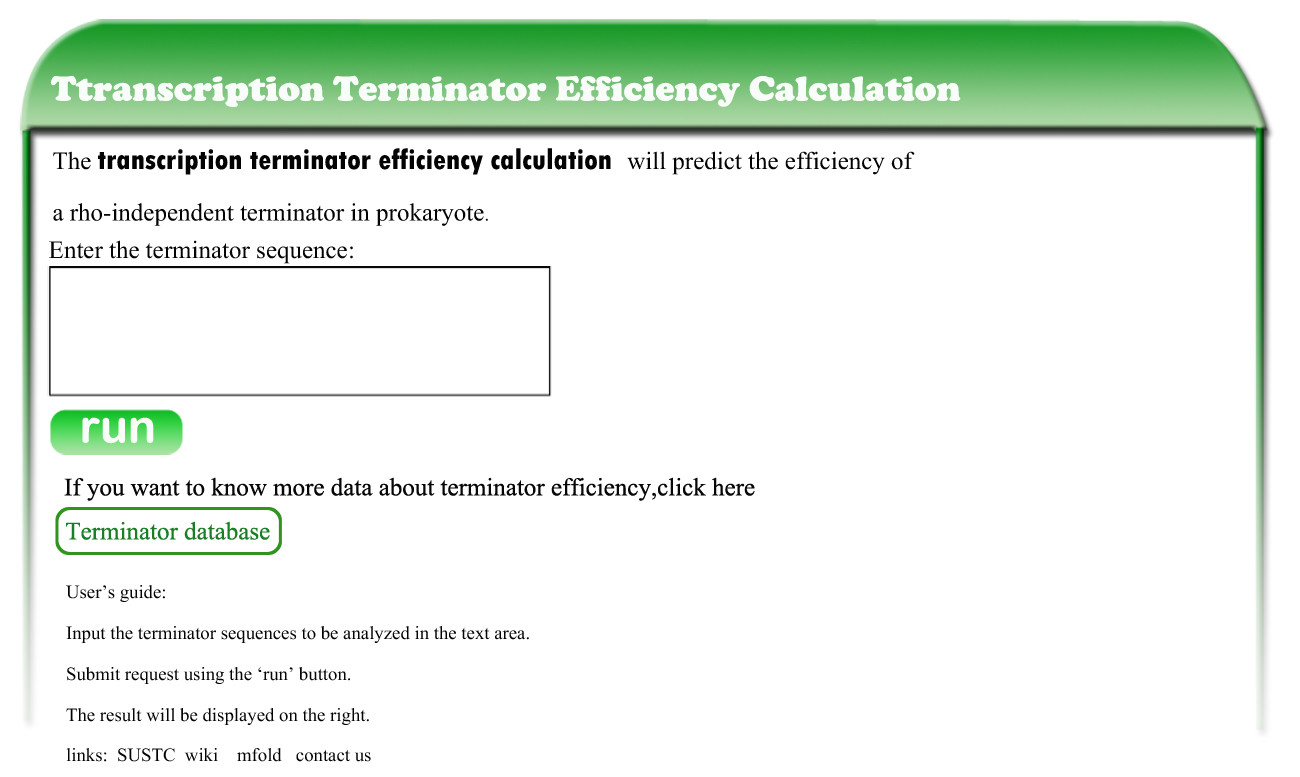
<style>
.page{position:relative;width:1300px;height:777px;background:#ffffff}
.page>*{position:absolute;margin:0}
.t1{font:36px "CooperBlack";color:#f9fdf9}
.t2{font:31.1px "Aparajita";color:#030303}
.t3{font:30px "TwCenMT-CondensedExtraBold";color:#030303}
.t4{font:23.3px "Aparajita";color:#030303}
.t5{font:31.1px "Aparajita";color:#040404}
.t6{font:46.6px "ArialRoundedMTBold";color:#f9fdf9}
.t7{font:31.1px "Aparajita";color:#070707}
.t8{font:31.1px "Aparajita";color:#1b7e26}
</style>
<div class="page">
<p class="t1" style="left:50px;top:75px;width:911px;height:32px">Ttranscription Terminator Efficiency Calculation</p>
<p class="t2" style="left:53px;top:148px;width:862px;height:78px">The <span class="t3">transcription terminator efficiency calculation </span>will predict the efficiency of  <br>a rho-independent terminator in prokaryote<span class="t4">.</span></p>
<p class="t5" style="left:49px;top:240px;width:304px;height:24px">Enter the terminator sequence:</p>
<p class="t6" style="left:82px;top:417px;width:72px;height:27px">run</p>
<p class="t7" style="left:64px;top:477px;width:691px;height:24px">If you want to know more data about terminator efficiency,click here</p>
<p class="t8" style="left:66px;top:521px;width:204px;height:19px">Terminator database</p>
<p class="t4" style="left:66px;top:585px;width:463px;height:177px">User’s guide:<br>Input the terminator sequences to be analyzed in the text area.<br>Submit request using the ‘run’ button.<br>The result will be displayed on the right.<br>links:  SUSTC  wiki    mfold   contact us</p>
</div>
